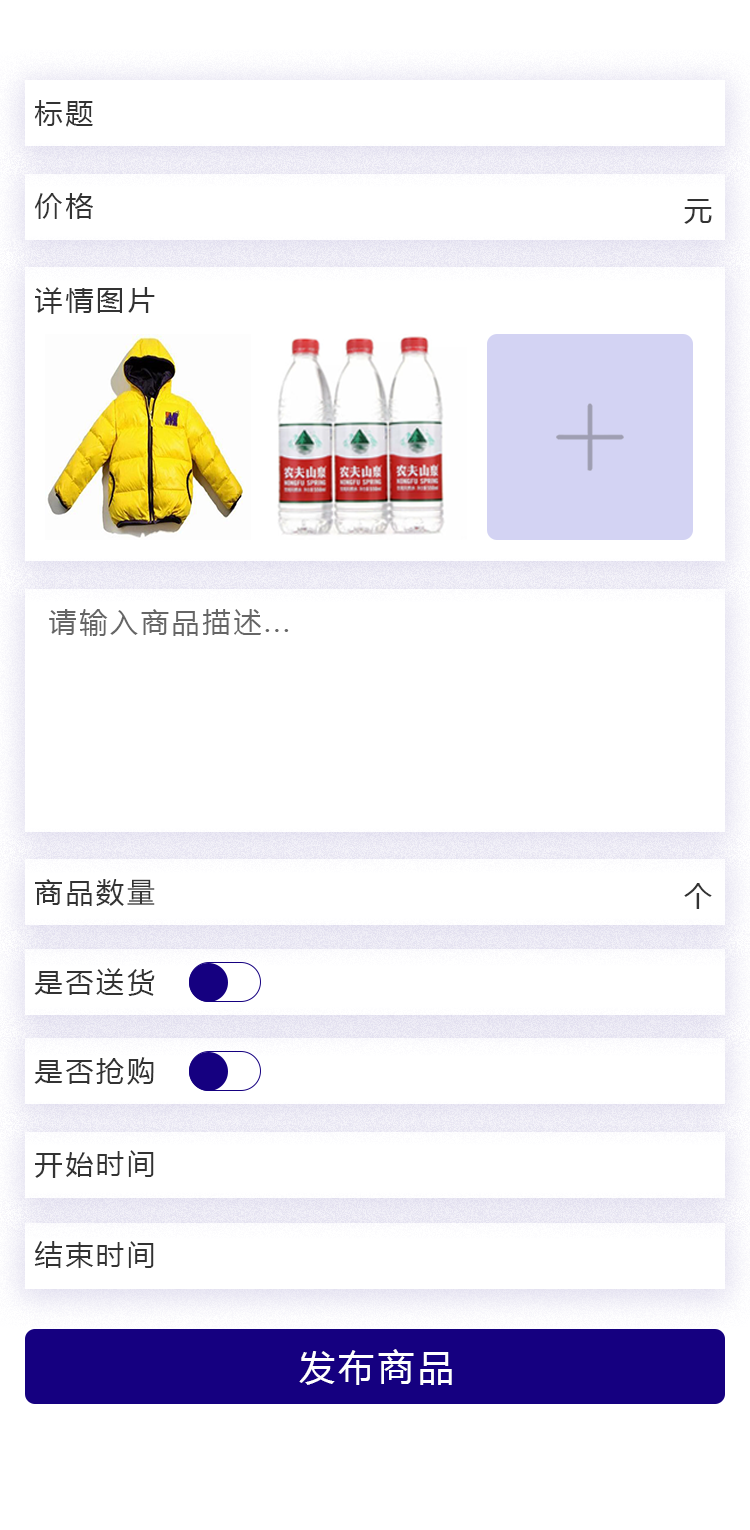
<style>
.page{position:relative;width:750px;height:1530px;background:#ffffff}
.page>*{position:absolute;margin:0}
.t1{font:28px "MicrosoftYaHei";letter-spacing:0.1em;color:#333333}
.t2{font:28px "MicrosoftYaHei";letter-spacing:0.1em;color:#666666}
.t3{font:36px "MicrosoftYaHei";letter-spacing:0.1em;color:#ffffff}
</style>
<div class="page">
<p class="t1" style="left:34px;top:100px;width:59px;height:27px">标题</p>
<p class="t1" style="left:34px;top:193px;width:59px;height:26px">价格</p>
<p class="t1" style="left:684px;top:199px;width:28px;height:25px">元</p>
<p class="t1" style="left:35px;top:287px;width:120px;height:27px">详情图片</p>
<p class="t2" style="left:49px;top:609px;width:240px;height:27px">请输入商品描述...</p>
<p class="t1" style="left:35px;top:879px;width:120px;height:27px">商品数量</p>
<p class="t1" style="left:684px;top:883px;width:28px;height:26px">个</p>
<p class="t1" style="left:34px;top:968px;width:121px;height:28px">是否送货</p>
<p class="t1" style="left:34px;top:1057px;width:120px;height:28px">是否抢购</p>
<p class="t1" style="left:35px;top:1150px;width:119px;height:28px">开始时间</p>
<p class="t1" style="left:34px;top:1241px;width:120px;height:27px">结束时间</p>
<p class="t3" style="left:299px;top:1349px;width:153px;height:36px">发布商品</p>
</div>
